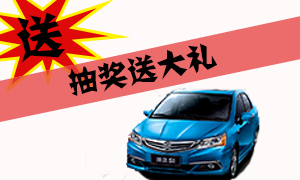
<style>
.page{position:relative;width:300px;height:180px;background:#fefafa}
.page>*{position:absolute;margin:0}
.t1{font:48px "FZJZJW--GB1-0";color:#000000}
.t2{font:30px "FZJZJW--GB1-0";color:#010101}
</style>
<div class="page">
<p class="t1" style="left:16px;top:12px;width:49px;height:51px;rotate:-8deg">送</p>
<p class="t2" style="left:68px;top:43px;width:150px;height:53px;rotate:-11deg">抽奖送大礼</p>
</div>
